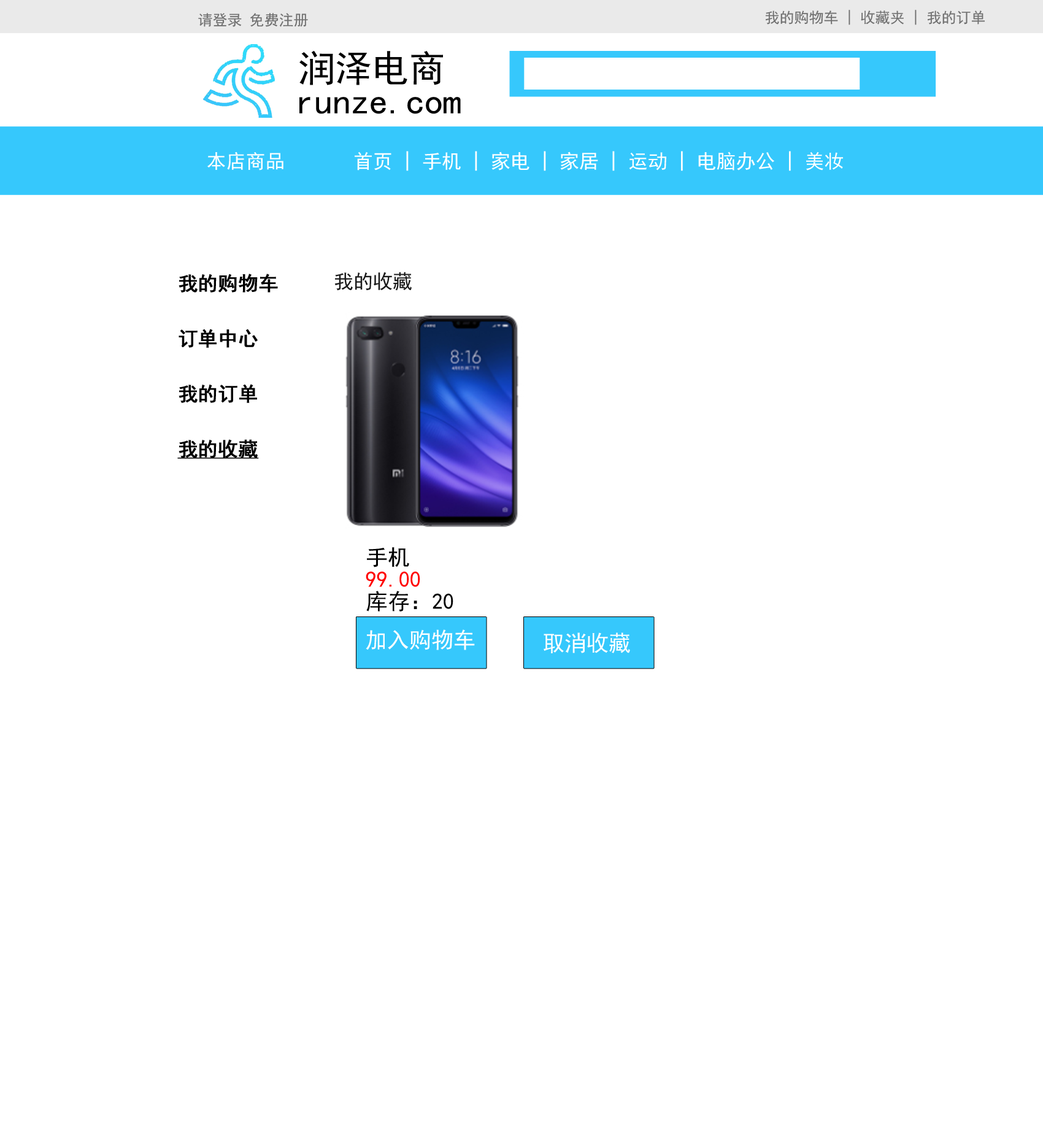
<style>
.page{position:relative;width:1043px;height:1144px;background:#ffffff}
.page>*{position:absolute;margin:0}
.t1{font:14.7px "SimHei";color:#6f6f6f}
.t2{font:36.8px "SimHei";color:#010101}
.t3{font:19.6px "SimHei";color:#ffffff}
.t4{font:19.6px/18.4px "SimHei";color:#000000;font-weight:bold}
.t5{font:19.6px/18.4px "SimHei";color:#000000;font-weight:bold;text-decoration:underline}
.t6{font:19.6px "SimHei";color:#1a1a1a}
.t7{font:22.1px/22.1px "SimHei";color:#ff0000}
.t8{font:22.1px/22.1px "SimHei";color:#000000}
.t9{font:22.1px "SimHei";color:#ffffff}
</style>
<div class="page">
<p class="t1" style="left:198px;top:13px;width:110px;height:14px">请登录 免费注册</p>
<p class="t1" style="left:765px;top:10px;width:220px;height:15px">我的购物车 | 收藏夹 | 我的订单</p>
<p class="t2" style="left:299px;top:51px;width:144px;height:34px">润泽电商</p>
<p class="t2" style="left:299px;top:97px;width:162px;height:17px">runze.com</p>
<p class="t3" style="left:207px;top:151px;width:636px;height:20px">本店商品       首页 | 手机 | 家电 | 家居 | 运动 | 电脑办公 | 美妆</p>
<p class="t4" style="left:177px;top:274px;width:101px;height:185px">我的购物车<br><br><br>订单中心<br><br><br>我的订单<br><br><br><span class="t5">我的收藏</span></p>
<p class="t6" style="left:334px;top:272px;width:78px;height:19px">我的收藏</p>
<p class="t7" style="left:366px;top:547px;width:87px;height:64px"><span class="t8">手机<br></span>99.00<br><span class="t8">库存：20</span></p>
<p class="t9" style="left:366px;top:629px;width:109px;height:21px">加入购物车</p>
<p class="t9" style="left:543px;top:632px;width:87px;height:21px">取消收藏</p>
</div>
